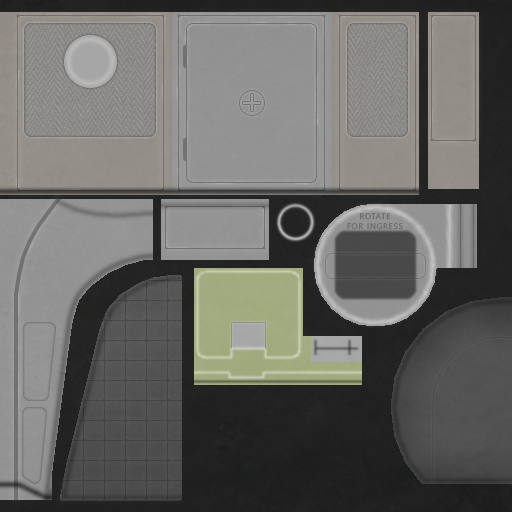
<style>
.page{position:relative;width:512px;height:512px}
.page>*{position:absolute;margin:0}
.t1{font:8px "SegoeUI";letter-spacing:0.1em}
</style>
<div class="page">
<p class="t1" style="left:347px;top:213px;width:56px;height:17px;text-align:center">ROTATE<br>FOR INGRESS</p>
</div>
